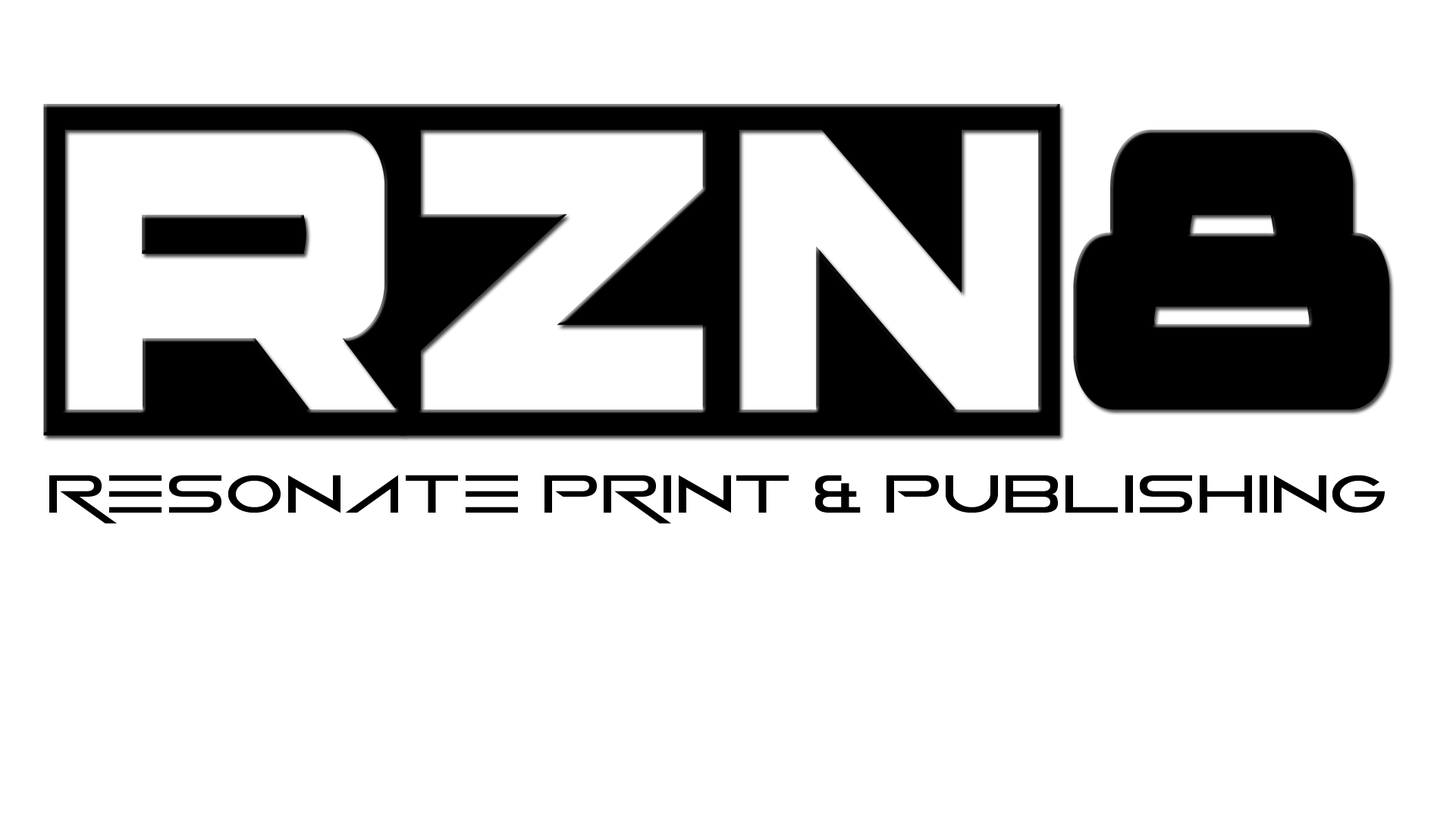
<style>
.page{position:relative;width:1456px;height:819px;background:#ffffff}
.page>*{position:absolute;margin:0}
.t1{font:587.8px "voxBOXExpanded";color:#000000;scale:0.72 1}
.t2{font:54.6px "VerminVibes2";color:#000000;scale:1.4 1}
</style>
<div class="page">
<p class="t1" style="left:43px;top:104px;width:1347px;height:332px">RZN8</p>
<p class="t2" style="left:49px;top:475px;width:1336px;height:49px">RESONATE PRINT &amp; PUBLISHING</p>
</div>
